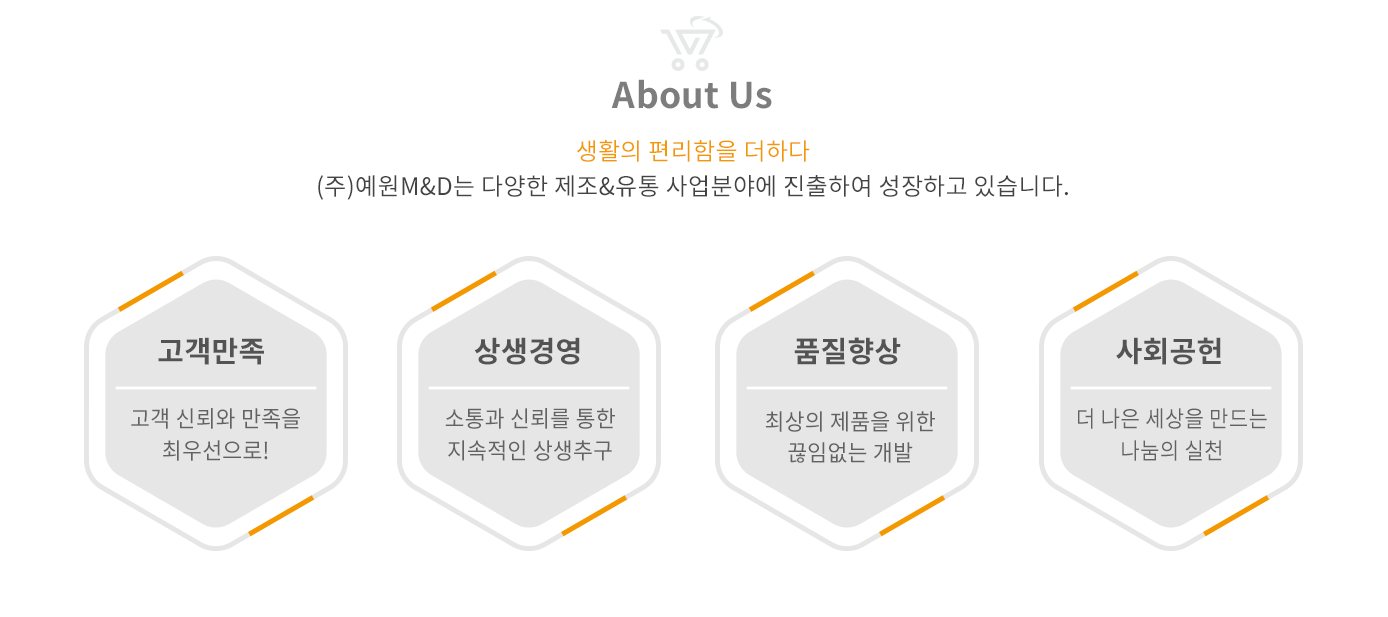
<style>
.page{position:relative;width:1388px;height:617px;background:#ffffff}
.page>*{position:absolute;margin:0}
.t1{font:35.5px "NotoSansCJKkr-Bold";letter-spacing:0.01em;color:#7d7d7d}
.t2{font:24.1px/35.5px "NotoSansCJKkr-Regular";letter-spacing:0.01em;color:#434343}
.t3{font:24.1px/35.5px "NotoSansCJKkr-Regular";letter-spacing:0.01em;color:#f39800}
.t4{font:29.1px "NotoSansCJKkr-Bold";letter-spacing:0.01em;color:#535353}
.t5{font:22.8px/31.7px "NotoSansCJKkr-Regular";letter-spacing:0.01em;color:#626262;scale:0.95 1}
.t6{font:22.8px/31.7px "NotoSansCJKkr-Regular";letter-spacing:0.01em;color:#626262;scale:0.93 1}
</style>
<div class="page">
<p class="t1" style="left:611px;top:79px;width:161px;height:30px">About Us</p>
<p class="t2" style="left:318px;top:140px;width:750px;height:60px;text-align:center"><span class="t3">생활의 편리함을 더하다<br></span>(주)예원M&amp;D는 다양한 제조&amp;유통 사업분야에 진출하여 성장하고 있습니다.</p>
<p class="t4" style="left:158px;top:337px;width:106px;height:28px">고객만족</p>
<p class="t4" style="left:474px;top:337px;width:106px;height:28px">상생경영</p>
<p class="t4" style="left:794px;top:337px;width:107px;height:28px">품질향상</p>
<p class="t4" style="left:1116px;top:337px;width:105px;height:28px">사회공헌</p>
<p class="t5" style="left:131px;top:408px;width:169px;height:53px;text-align:center">고객 신뢰와 만족을 최우선으로!</p>
<p class="t5" style="left:445px;top:408px;width:170px;height:53px;text-align:center">소통과 신뢰를 통한<br>지속적인 상생추구</p>
<p class="t5" style="left:765px;top:411px;width:170px;height:52px;text-align:center">최상의 제품을 위한<br>끊임없는 개발</p>
<p class="t6" style="left:1078px;top:408px;width:189px;height:53px;text-align:center">더 나은 세상을 만드는 나눔의 실천</p>
</div>
